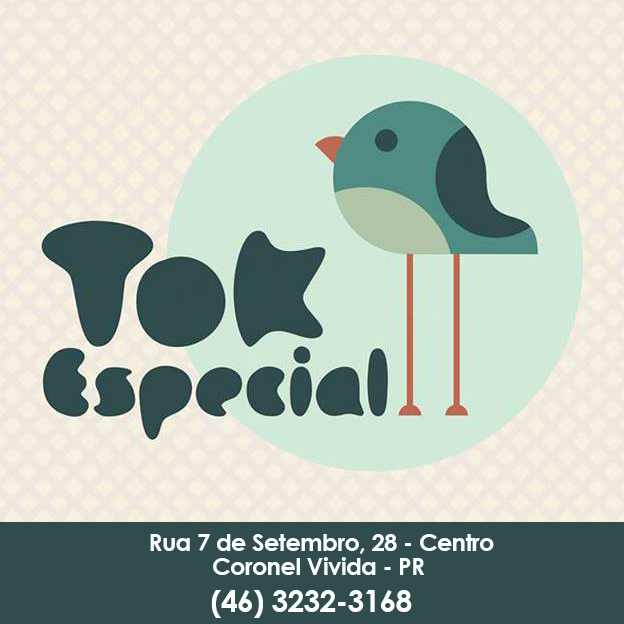
<style>
.page{position:relative;width:624px;height:624px}
.page>*{position:absolute;margin:0}
.t1{font:24px/24px "CenturyGothic-Bold";letter-spacing:-0.025em;color:#fafdfd}
.t2{font:30px "CenturyGothic-Bold";letter-spacing:-0.025em;color:#fafdfd}
</style>
<div class="page">
<p class="t1" style="left:150px;top:534px;width:344px;height:41px;text-align:center">Rua 7 de Setembro, 28 - Centro<br>Coronel Vivida - PR</p>
<p class="t2" style="left:211px;top:590px;width:201px;height:28px">(46) 3232-3168</p>
</div>
